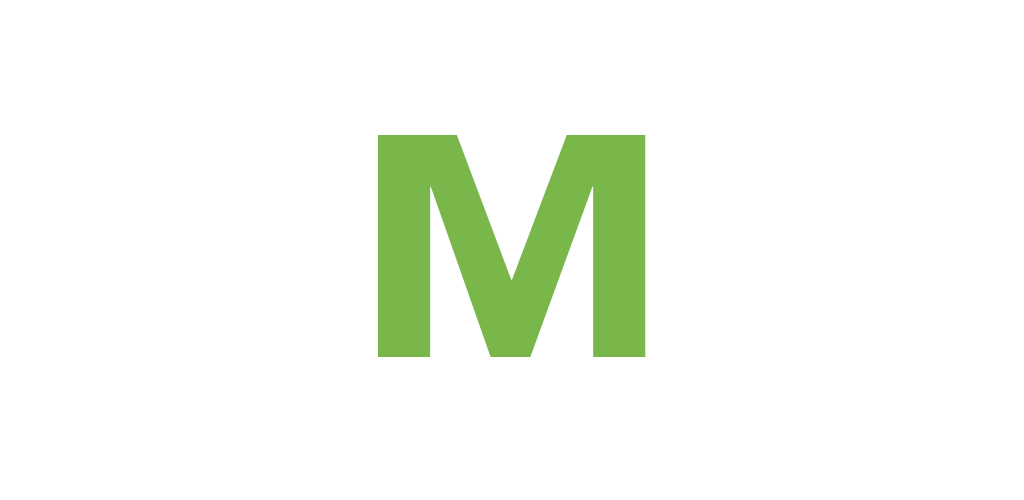
<style>
.page{position:relative;width:1024px;height:500px;background:#ffffff}
.page>*{position:absolute;margin:0}
.t1{font:313.7px "Avenir-Black";color:#79b74a;scale:1.06 1}
</style>
<div class="page">
<p class="t1" style="left:378px;top:135px;width:268px;height:222px">M</p>
</div>
